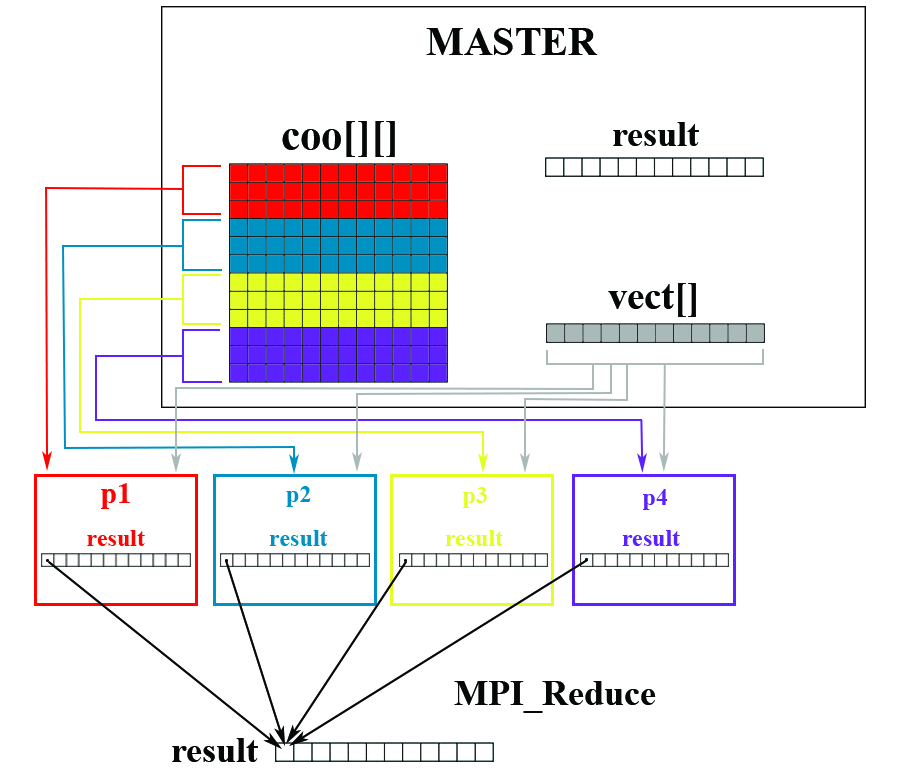
<style>
.page{position:relative;width:910px;height:784px;background:#ffffff}
.page>*{position:absolute;margin:0}
.t1{font:39.6px "TimesNewRomanPS-BoldMT";color:#060808}
.t2{font:42.2px "TimesNewRomanPS-BoldMT";color:#060808}
.t3{font:36px "TimesNewRomanPS-BoldMT";color:#060808}
.t4{font:30px "TimesNewRomanPS-BoldMT";color:#ff0300}
.t5{font:24px "TimesNewRomanPS-BoldMT";color:#e3ff21}
.t6{font:24px "TimesNewRomanPS-BoldMT";color:#5b21ff}
.t7{font:24px "TimesNewRomanPS-BoldMT";color:#ff0300}
.t8{font:23.7px "TimesNewRomanPS-BoldMT";color:#0092c3}
</style>
<div class="page">
<p class="t1" style="left:426px;top:28px;width:172px;height:27px">MASTER</p>
<p class="t2" style="left:282px;top:121px;width:113px;height:36px">coo[][]</p>
<p class="t3" style="left:613px;top:122px;width:86px;height:24px">result</p>
<p class="t4" style="left:101px;top:483px;width:29px;height:26px">p1</p>
<p class="t5" style="left:463px;top:487px;width:24px;height:21px">p3</p>
<p class="t6" style="left:643px;top:489px;width:25px;height:21px">p4</p>
<p class="t7" style="left:87px;top:530px;width:58px;height:16px">result</p>
<p class="t8" style="left:269px;top:530px;width:59px;height:16px">result</p>
<p class="t5" style="left:445px;top:530px;width:58px;height:16px">result</p>
<p class="t6" style="left:622px;top:530px;width:58px;height:16px">result</p>
<p class="t3" style="left:454px;top:681px;width:202px;height:32px">MPI_Reduce</p>
<p class="t3" style="left:172px;top:738px;width:86px;height:24px">result</p>
</div>
